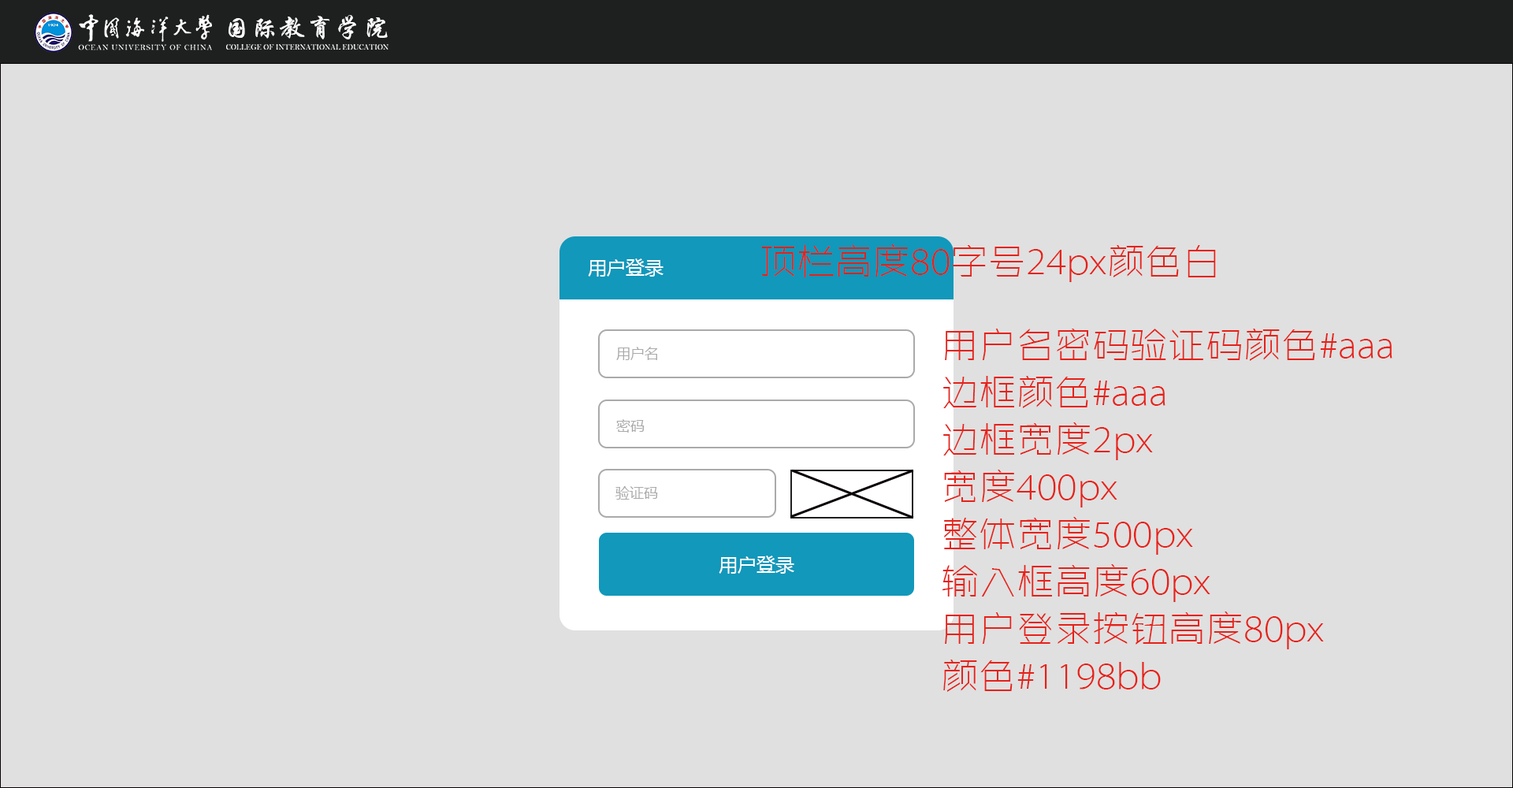
<style>
.page{position:relative;width:1513px;height:788px;background:#e0e0e0}
.page>*{position:absolute;margin:0}
.t1{font:26px "STXingkai";letter-spacing:0.075em;color:#ffffff}
.t2{font:37.8px "ZHSRXT--GBK1-0";color:#e72119}
.t3{font:18.9px "MicrosoftYaHei";color:#ffffff}
.t4{font:37.8px/47.3px "ZHSRXT--GBK1-0";color:#e72119}
.t5{font:14.2px "MicrosoftYaHei";color:#aaaaaa}
</style>
<div class="page">
<p class="t1" style="left:229px;top:15px;width:159px;height:24px">国际教育学院</p>
<p class="t2" style="left:761px;top:244px;width:455px;height:38px">顶栏高度80字号24px颜色白</p>
<p class="t3" style="left:588px;top:258px;width:76px;height:19px">用户登录</p>
<p class="t4" style="left:943px;top:329px;width:450px;height:363px">用户名密码验证码颜色#aaa<br>边框颜色#aaa<br>边框宽度2px<br>宽度400px<br>整体宽度500px<br>输入框高度60px<br>用户登录按钮高度80px<br>颜色#1198bb</p>
<p class="t5" style="left:616px;top:347px;width:42px;height:13px">用户名</p>
<p class="t5" style="left:616px;top:419px;width:29px;height:14px">密码</p>
<p class="t5" style="left:615px;top:486px;width:43px;height:14px">验证码</p>
<p class="t3" style="left:719px;top:556px;width:75px;height:18px">用户登录</p>
</div>
